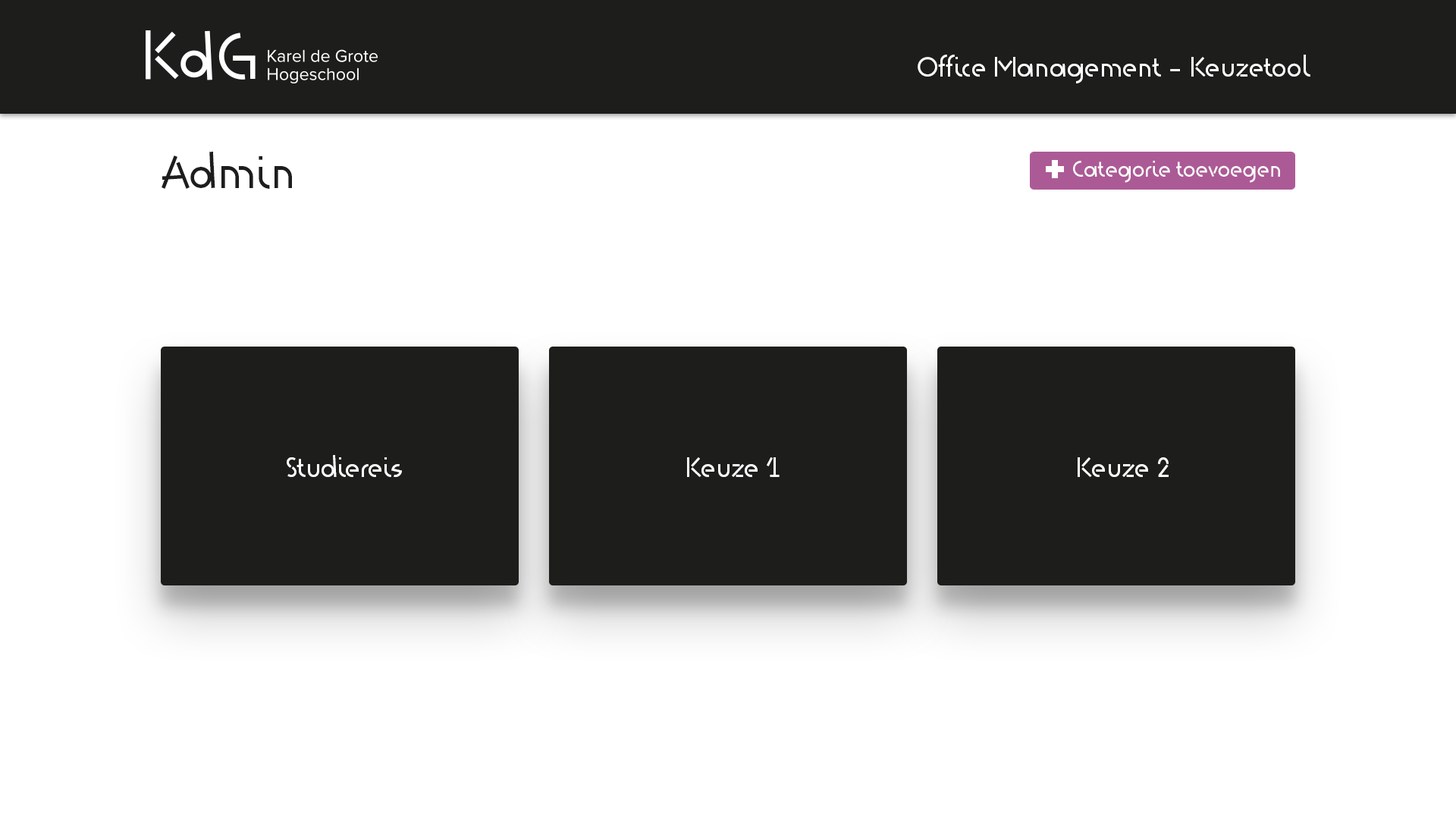
<style>
.page{position:relative;width:1456px;height:819px;background:#ffffff}
.page>*{position:absolute;margin:0}
.t1{font:27.3px "KdG-Regular";color:#fefefe}
.t2{font:45.5px "KdG-Regular";color:#1d1d1b}
.t3{font:22.7px "KdG-Regular";color:#fefefe}
</style>
<div class="page">
<p class="t1" style="left:918px;top:55px;width:392px;height:28px">Office Management - Keuzetool</p>
<p class="t2" style="left:162px;top:152px;width:130px;height:37px">Admin</p>
<p class="t3" style="left:1073px;top:161px;width:207px;height:22px">Categorie toevoegen</p>
<p class="t1" style="left:287px;top:455px;width:115px;height:22px">Studiereis</p>
<p class="t1" style="left:687px;top:457px;width:93px;height:20px">Keuze 1</p>
<p class="t1" style="left:1078px;top:457px;width:91px;height:20px">Keuze 2</p>
</div>
